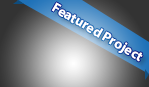
<style>
.page{position:relative;width:149px;height:87px}
.page>*{position:absolute;margin:0}
.t1{font:13.8px "MyriadPro-Bold";color:#ffffff}
</style>
<div class="page">
<p class="t1" style="left:51px;top:2px;width:92px;height:60px;rotate:30deg">Featured Project</p>
</div>
